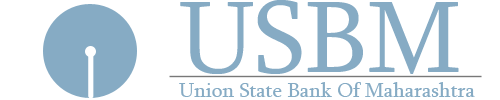
<style>
.page{position:relative;width:500px;height:100px;background:#ffffff}
.page>*{position:absolute;margin:0}
.t1{font:104.2px "Sylfaen";color:#86abc4}
.t2{font:20.9px "Sylfaen";color:#86abc4}
</style>
<div class="page">
<p class="t1" style="left:180px;top:0px;width:279px;height:74px">USBM</p>
<p class="t2" style="left:179px;top:82px;width:296px;height:15px">Union State Bank Of Maharashtra</p>
</div>
